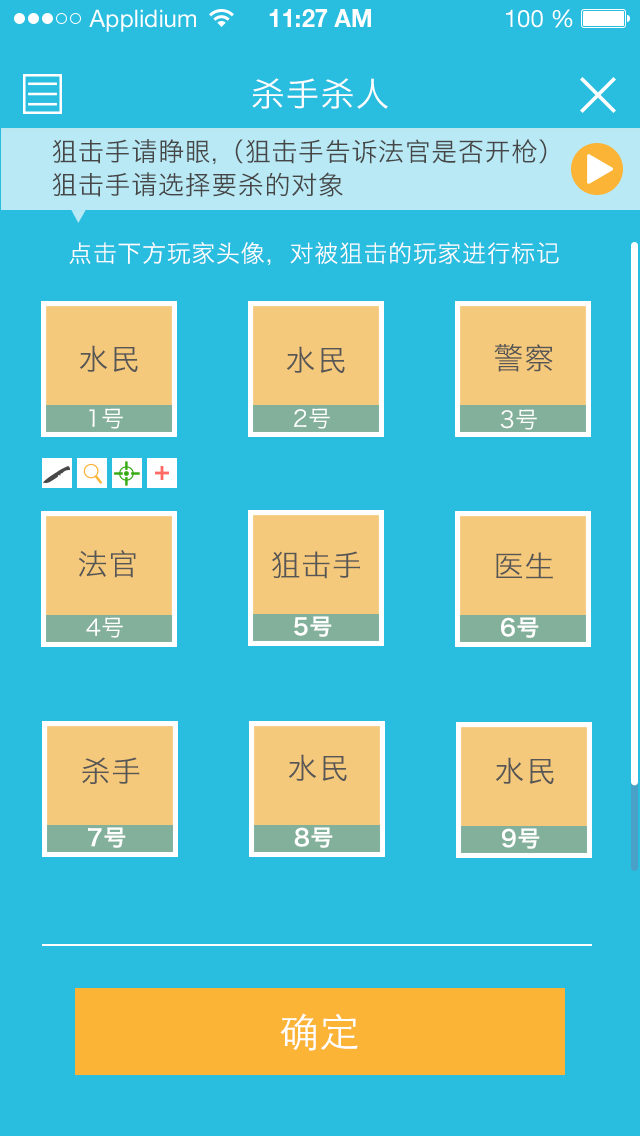
<style>
.page{position:relative;width:640px;height:1136px;background:#29bde0}
.page>*{position:absolute;margin:0}
.t1{font:34px "HiraginoSansGB-W3";letter-spacing:0.025em;color:#ffffff}
.t2{font:26px/33.4px "HiraginoSansGB-W3";letter-spacing:0.025em;color:#464646}
.t3{font:24px "HiraginoSansGB-W3";letter-spacing:0.025em;color:#ffffff}
.t4{font:30px "HiraginoSansGB-W3";letter-spacing:0.025em;color:#565656}
.t5{font:22.8px "HiraginoSansGB-W3";letter-spacing:0.025em;color:#ffffff}
.t6{font:22.8px "HiraginoSansGB-W6";letter-spacing:0.025em;color:#ffffff}
.t7{font:40px "STHeitiSC-Light";letter-spacing:0.025em;color:#ffffff}
</style>
<div class="page">
<p class="t1" style="left:252px;top:78px;width:136px;height:31px">杀手杀人</p>
<p class="t2" style="left:52px;top:139px;width:495px;height:58px">狙击手请睁眼,（狙击手告诉法官是否开枪）<br>狙击手请选择要杀的对象</p>
<p class="t3" style="left:69px;top:242px;width:490px;height:23px">点击下方玩家头像，对被狙击的玩家进行标记</p>
<p class="t4" style="left:79px;top:345px;width:59px;height:27px">水民</p>
<p class="t4" style="left:286px;top:346px;width:59px;height:27px">水民</p>
<p class="t4" style="left:494px;top:343px;width:59px;height:29px">警察</p>
<p class="t5" style="left:89px;top:408px;width:34px;height:21px">1号</p>
<p class="t5" style="left:294px;top:408px;width:36px;height:21px">2号</p>
<p class="t5" style="left:500px;top:409px;width:37px;height:21px">3号</p>
<p class="t4" style="left:78px;top:550px;width:58px;height:28px">法官</p>
<p class="t4" style="left:272px;top:551px;width:88px;height:28px">狙击手</p>
<p class="t4" style="left:496px;top:552px;width:57px;height:27px">医生</p>
<p class="t5" style="left:86px;top:617px;width:37px;height:21px">4号</p>
<p class="t6" style="left:294px;top:616px;width:38px;height:21px">5号</p>
<p class="t6" style="left:501px;top:617px;width:38px;height:21px">6号</p>
<p class="t4" style="left:82px;top:757px;width:58px;height:27px">杀手</p>
<p class="t4" style="left:288px;top:754px;width:59px;height:27px">水民</p>
<p class="t4" style="left:495px;top:757px;width:59px;height:27px">水民</p>
<p class="t6" style="left:88px;top:827px;width:38px;height:21px">7号</p>
<p class="t6" style="left:294px;top:827px;width:39px;height:21px">8号</p>
<p class="t6" style="left:501px;top:828px;width:39px;height:21px">9号</p>
<p class="t7" style="left:280px;top:1013px;width:78px;height:38px">确定</p>
</div>
